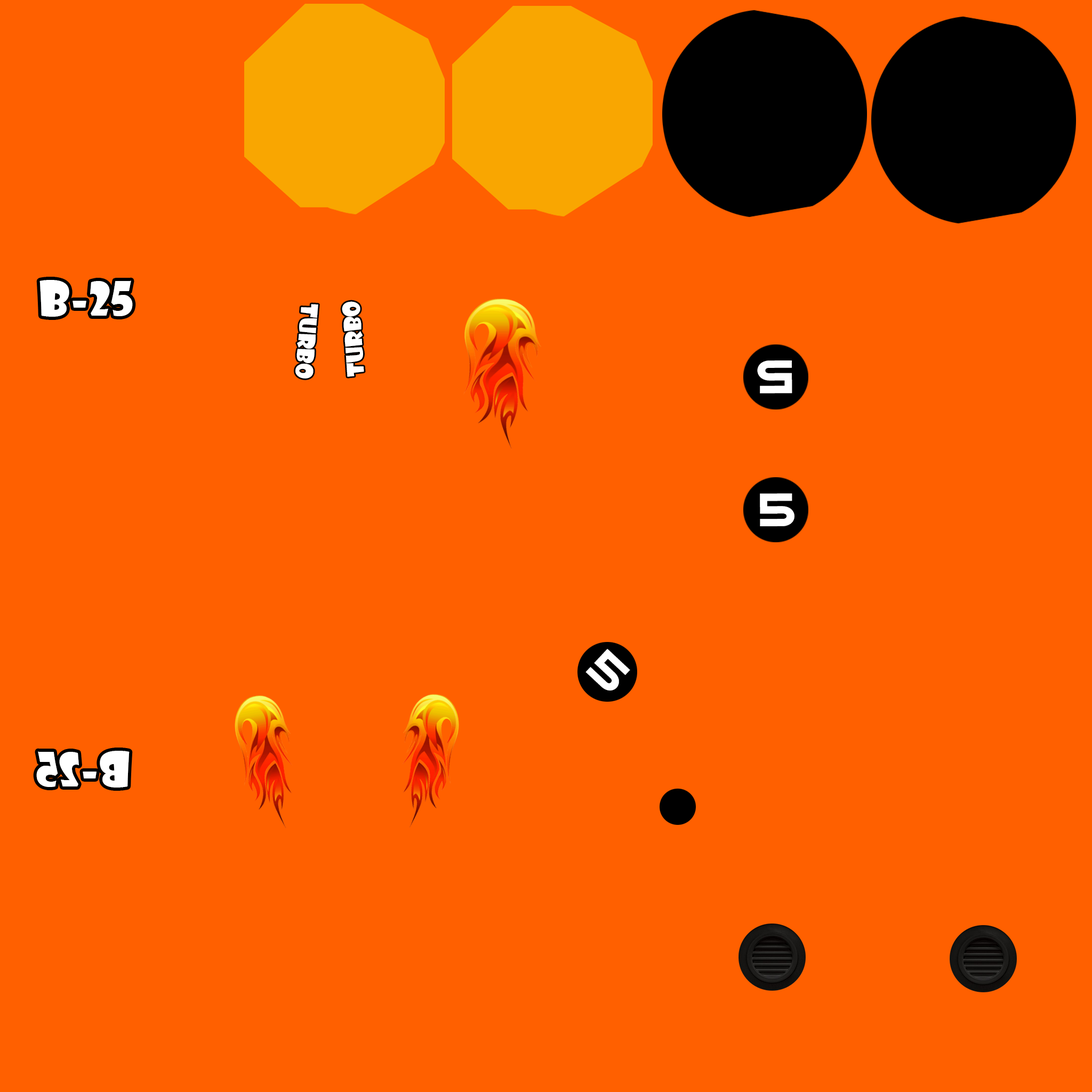
<style>
.page{position:relative;width:1092px;height:1092px;background:#ff6000}
.page>*{position:absolute;margin:0}
.t1{font:46px "ShowcardGothic-Reg";color:#ffffff;font-variant:small-caps}
.t2{font:32px "ShowcardGothic-Reg";color:#ffffff;font-variant:small-caps}
.t3{font:45.4px "SuiGeneris";color:#ffffff;font-variant:small-caps}
.t4{font:43.9px "SuiGeneris";color:#ffffff;font-variant:small-caps}
</style>
<div class="page">
<p class="t1" style="left:39px;top:280px;width:94px;height:37px">B-25</p>
<p class="t2" style="left:295px;top:304px;width:23px;height:75px;rotate:95deg">turbo</p>
<p class="t2" style="left:342px;top:301px;width:22px;height:76px;rotate:-94deg">turbo</p>
<p class="t3" style="left:757px;top:360px;width:35px;height:33px;rotate:180deg">5</p>
<p class="t3" style="left:760px;top:493px;width:34px;height:33px">5</p>
<p class="t4" style="left:585px;top:649px;width:45px;height:41px;rotate:43deg">5</p>
<p class="t1" style="left:36px;top:751px;width:94px;height:37px;rotate:180deg">B-25</p>
</div>
